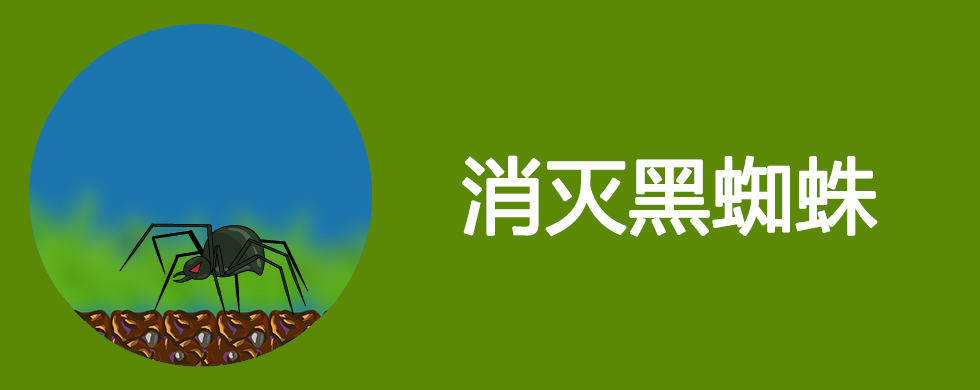
<style>
.page{position:relative;width:980px;height:390px;background:#5c8905}
.page>*{position:absolute;margin:0}
.t1{font:80.9px "MicrosoftYaHei";color:#ffffff;font-weight:bold}
</style>
<div class="page">
<p class="t1" style="left:462px;top:155px;width:416px;height:82px">消灭黑蜘蛛</p>
</div>
